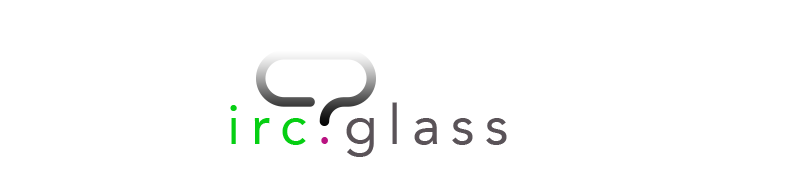
<style>
.page{position:relative;width:792px;height:176px;background:#ffffff}
.page>*{position:absolute;margin:0}
.t1{font:54.6px "Avenir-Roman";letter-spacing:0.2em;color:#5a5358}
.t2{font:54.6px "Avenir-Roman";letter-spacing:0.2em;color:#06cf13}
.t3{font:54.6px "Avenir-Roman";letter-spacing:0.2em;color:#b91281}
</style>
<div class="page">
<p class="t1" style="left:230px;top:102px;width:277px;height:55px"><span class="t2">irc</span><span class="t3">.</span>glass</p>
</div>
